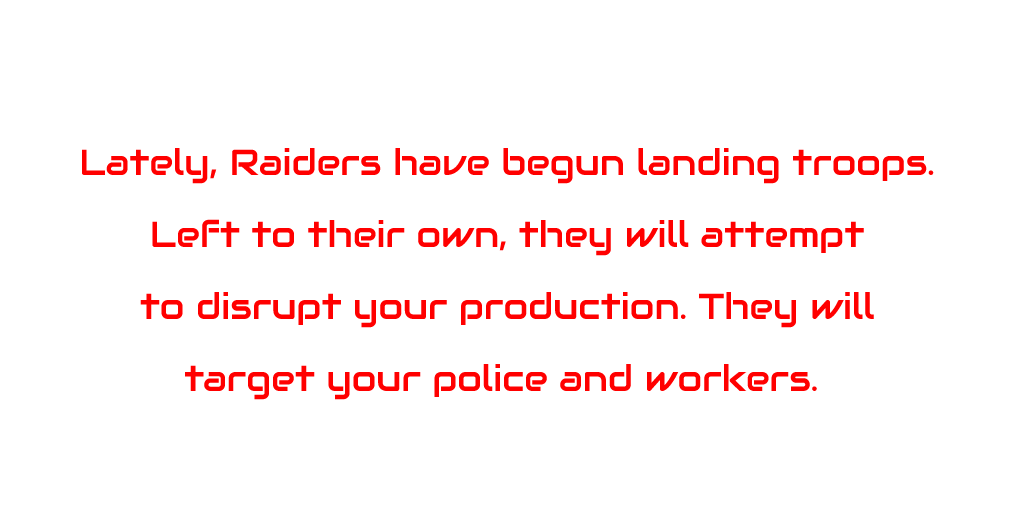
<style>
.page{position:relative;width:1024px;height:512px;background:#ffffff}
.page>*{position:absolute;margin:0}
.t1{font:36px/72px "Audiowide-Regular";color:#ff0000}
</style>
<div class="page">
<p class="t1" style="left:82px;top:148px;width:852px;height:252px;text-align:center">Lately, Raiders have begun landing troops.<br>Left to their own, they will attempt<br>to disrupt your production. They will<br>target your police and workers.</p>
</div>
